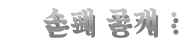
<style>
.page{position:relative;width:180px;height:40px;background:#ffffff}
.page>*{position:absolute;margin:0}
.t1{font:26.9px "SDKukdetopokki-bBd";letter-spacing:0.08em;color:#9f9c9c}
</style>
<div class="page">
<p class="t1" style="left:43px;top:8px;width:134px;height:24px">손패 공개 :</p>
</div>
